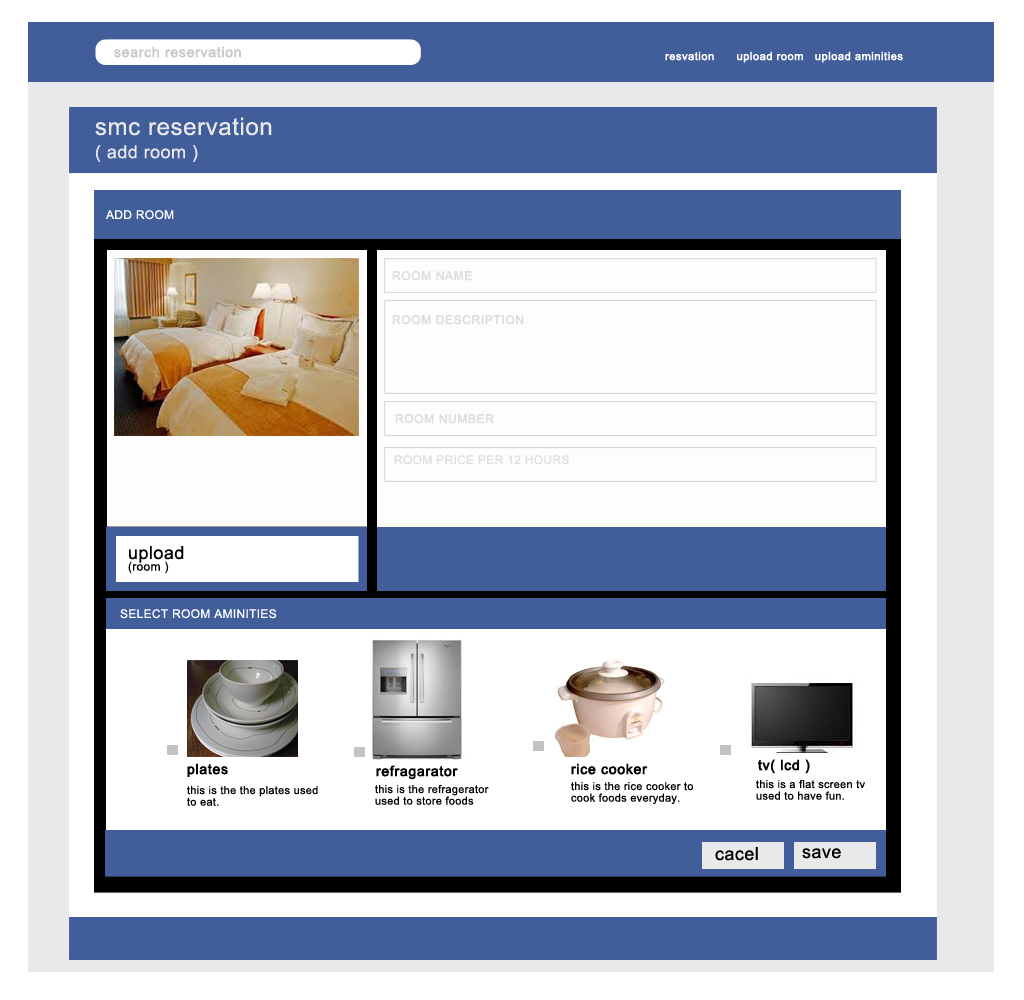
<style>
.page{position:relative;width:1024px;height:1000px;background:#ffffff}
.page>*{position:absolute;margin:0}
.t1{font:14px "ArialMT";letter-spacing:0.025em;color:#cacaca;font-weight:bold}
.t2{font:11px "ArialMT";letter-spacing:0.025em;color:#ffffff;font-weight:bold}
.t3{font:24px/11.6px "ArialMT";letter-spacing:0.025em;color:#e9e9e9}
.t4{font:18px/11.6px "ArialMT";letter-spacing:0.025em;color:#e9e9e9}
.t5{font:12px "ArialMT";letter-spacing:0.025em;color:#ffffff}
.t6{font:12px "ArialMT";letter-spacing:0.025em;color:#dedede;font-weight:bold}
.t7{font:12px "ArialMT";letter-spacing:0.025em;color:#dedede}
.t8{font:12px/11.6px "ArialMT";letter-spacing:0.025em;color:#000000}
.t9{font:18px/11.6px "ArialMT";letter-spacing:0.025em;color:#000000}
.t10{font:14px "ArialMT";letter-spacing:0.025em;color:#000000;font-weight:bold}
.t11{font:11px/11.6px "ArialMT";letter-spacing:0.025em;color:#000000}
.t12{font:18px "ArialMT";letter-spacing:0.025em;color:#000000}
</style>
<div class="page">
<p class="t1" style="left:114px;top:46px;width:127px;height:12px">search reservation</p>
<p class="t2" style="left:665px;top:51px;width:238px;height:12px">resvation      upload room   upload aminities</p>
<p class="t3" style="left:95px;top:117px;width:177px;height:45px">smc reservation <br><br><span class="t4">( add room )</span></p>
<p class="t5" style="left:105px;top:210px;width:69px;height:10px">ADD ROOM</p>
<p class="t6" style="left:392px;top:271px;width:80px;height:10px">ROOM NAME</p>
<p class="t6" style="left:392px;top:315px;width:132px;height:10px">ROOM DESCRIPTION</p>
<p class="t6" style="left:395px;top:414px;width:99px;height:10px">ROOM NUMBER</p>
<p class="t7" style="left:394px;top:455px;width:175px;height:10px">ROOM PRICE PER 12 HOURS</p>
<p class="t8" style="left:128px;top:546px;width:56px;height:28px"><span class="t9">upload <br></span>(room )</p>
<p class="t5" style="left:120px;top:609px;width:157px;height:10px">SELECT ROOM AMINITIES</p>
<p class="t10" style="left:758px;top:759px;width:52px;height:15px">tv( lcd )</p>
<p class="t10" style="left:187px;top:763px;width:41px;height:14px">plates</p>
<p class="t10" style="left:376px;top:765px;width:82px;height:15px">refragarator</p>
<p class="t10" style="left:571px;top:763px;width:77px;height:12px">rice cooker</p>
<p class="t11" style="left:375px;top:784px;width:114px;height:21px">this is the refragerator <br>used to store foods</p>
<p class="t11" style="left:571px;top:782px;width:123px;height:22px">this is the rice cooker to <br>cook foods everyday.</p>
<p class="t11" style="left:756px;top:779px;width:109px;height:21px">this is a flat screen tv<br>used to have fun.</p>
<p class="t11" style="left:187px;top:786px;width:131px;height:20px">this is the the plates used <br>to eat.</p>
<p class="t12" style="left:715px;top:847px;width:43px;height:14px">cacel</p>
<p class="t12" style="left:802px;top:848px;width:39px;height:11px">save</p>
</div>
